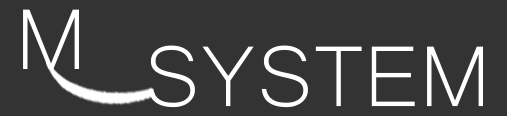
<style>
.page{position:relative;width:507px;height:116px;background:#333333}
.page>*{position:absolute;margin:0}
.t1{font:110.8px "Microsoft-Yi-Baiti";color:#ffffff;text-transform:uppercase}
</style>
<div class="page">
<p class="t1" style="left:23px;top:9px;width:56px;height:60px">M</p>
<p class="t1" style="left:148px;top:45px;width:335px;height:63px">System</p>
</div>
